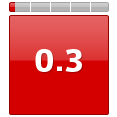
<style>
.page{position:relative;width:117px;height:117px;background:#d40000}
.page>*{position:absolute;margin:0}
.t1{font:36px "Colaborate-Bold";color:#ffffff;text-transform:uppercase}
</style>
<div class="page">
<p class="t1" style="left:35px;top:49px;width:47px;height:23px">0.3</p>
</div>
